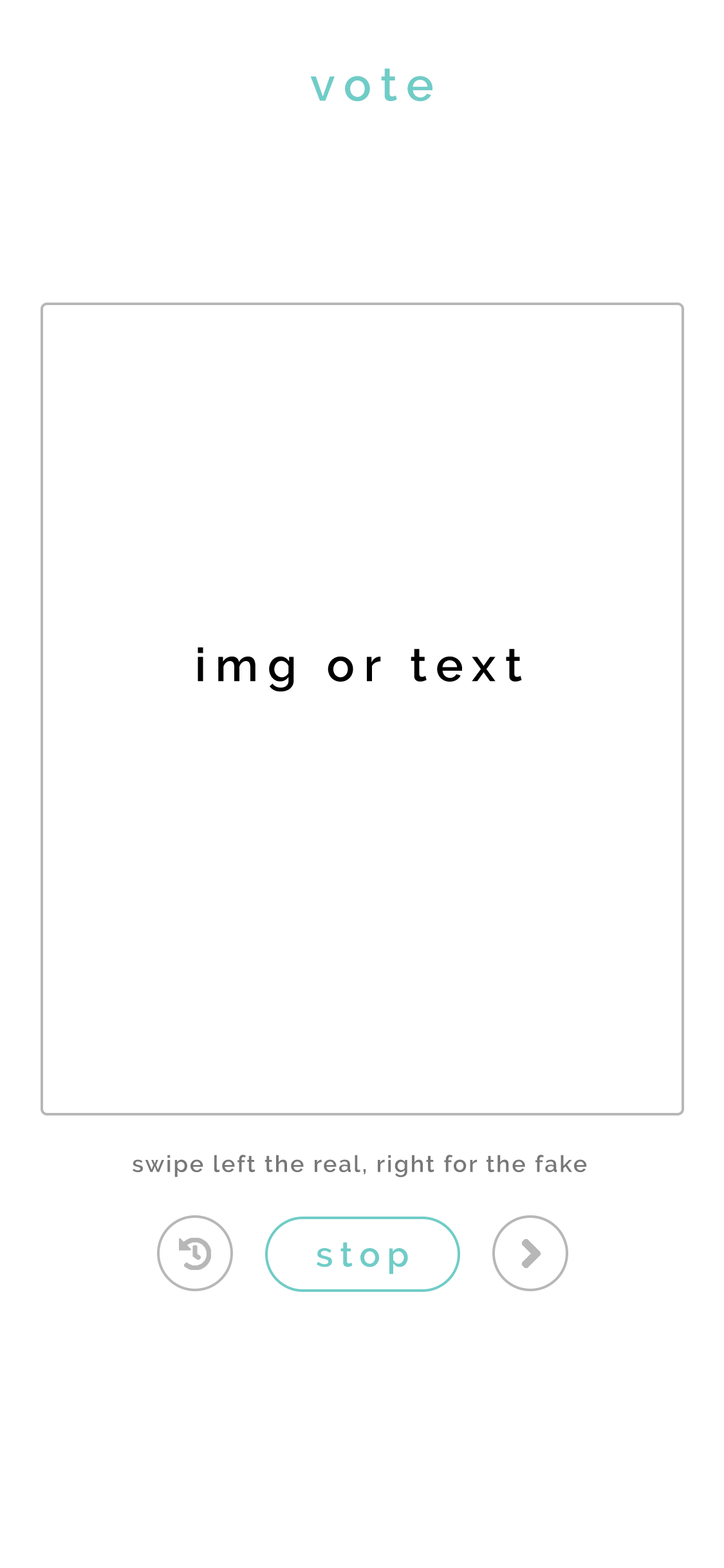
<style>
.page{position:relative;width:724px;height:1568px;background:#ffffff}
.page>*{position:absolute;margin:0}
.t1{font:46.3px "Raleway-SemiBold";letter-spacing:0.2em;color:#70ccc7}
.t2{font:23.2px "Raleway-SemiBold";letter-spacing:0.075em;color:#797878}
.t3{font:34.8px "Raleway-SemiBold";letter-spacing:0.2em;color:#70ccc7}
</style>
<div class="page">
<p class="t1" style="left:310px;top:68px;width:123px;height:34px">vote</p>
<p class="t2" style="left:133px;top:1155px;width:454px;height:22px">swipe left the real, right for the fake</p>
<p class="t3" style="left:317px;top:1242px;width:91px;height:32px">stop</p>
</div>
